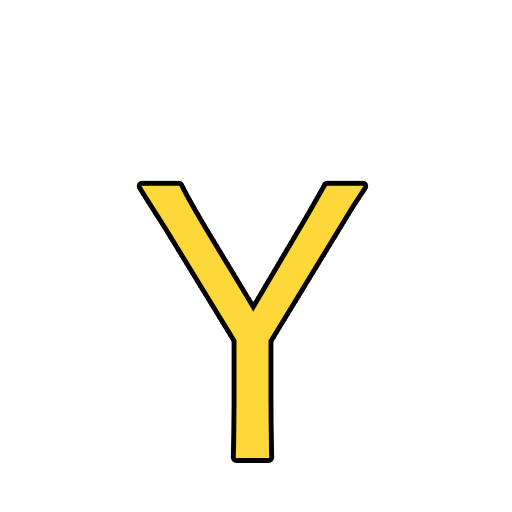
<style>
.page{position:relative;width:512px;height:512px;background:#ffffff}
.page>*{position:absolute;margin:0}
.t1{font:405px "Radiance";letter-spacing:-0.04em;color:#fed738}
</style>
<div class="page">
<p class="t1" style="left:141px;top:185px;width:223px;height:273px">Y</p>
</div>
